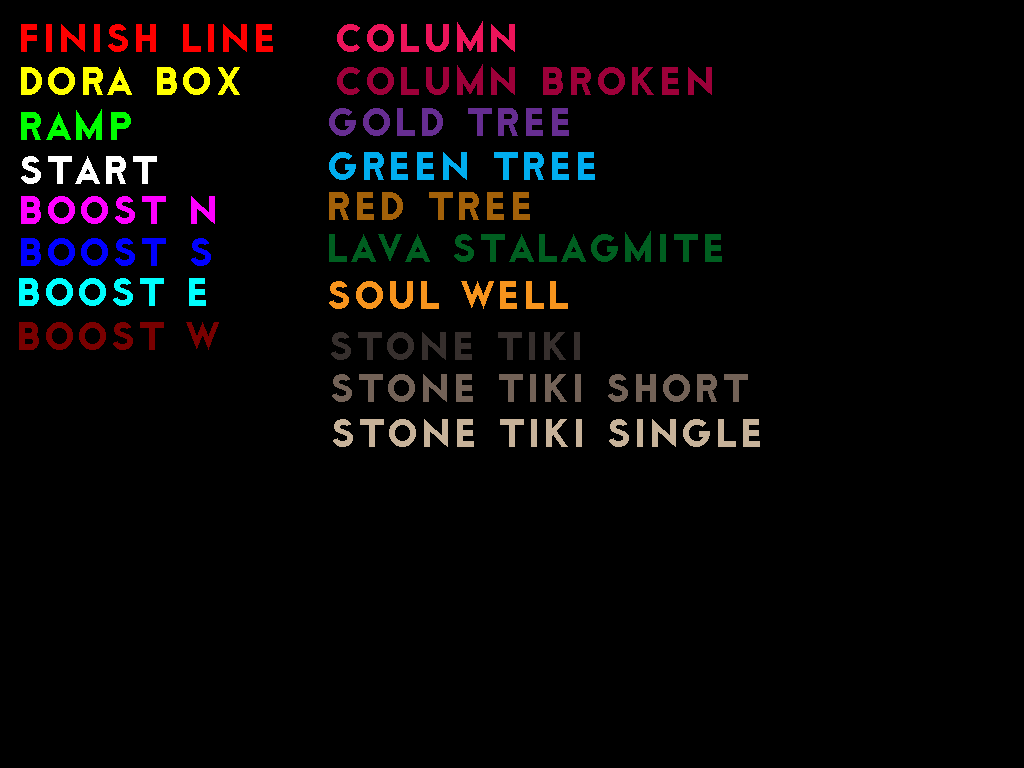
<style>
.page{position:relative;width:1024px;height:768px;background:#000000}
.page>*{position:absolute;margin:0}
.t1{font:48px "Cityof";color:#ff0000}
.t2{font:48px "Cityof";color:#ed145a}
.t3{font:48px "Cityof";color:#9d0039}
.t4{font:48px "Cityof";color:#ffff00}
.t5{font:48px "Cityof";color:#00ff00}
.t6{font:48px "Cityof";color:#662d91}
.t7{font:48px "Cityof";color:#ffffff}
.t8{font:48px "Cityof";color:#00adef}
.t9{font:48px "Cityof";color:#ff00ff}
.t10{font:48px "Cityof";color:#a36109}
.t11{font:48px "Cityof";color:#005e20}
.t12{font:48px "Cityof";color:#0000ff}
.t13{font:48px "Cityof";color:#00ffff}
.t14{font:48px "Cityof";color:#f7941d}
.t15{font:48px "Cityof";color:#790000}
.t16{font:48px "Cityof";color:#362f2d}
.t17{font:48px "Cityof";color:#736257}
.t18{font:48px "Cityof";color:#c7b299}
</style>
<div class="page">
<p class="t1" style="left:21px;top:24px;width:252px;height:28px">finish line</p>
<p class="t2" style="left:337px;top:21px;width:178px;height:31px">column</p>
<p class="t3" style="left:337px;top:64px;width:375px;height:31px">column broken</p>
<p class="t4" style="left:21px;top:67px;width:219px;height:28px">dora box</p>
<p class="t5" style="left:21px;top:109px;width:110px;height:31px">ramp</p>
<p class="t6" style="left:329px;top:108px;width:240px;height:28px">gold tree</p>
<p class="t7" style="left:21px;top:156px;width:136px;height:28px">start</p>
<p class="t8" style="left:329px;top:152px;width:266px;height:28px">green tree</p>
<p class="t9" style="left:21px;top:196px;width:194px;height:28px">boost n</p>
<p class="t10" style="left:329px;top:192px;width:201px;height:28px">red tree</p>
<p class="t11" style="left:329px;top:231px;width:393px;height:31px">lava stalagmite</p>
<p class="t12" style="left:21px;top:238px;width:190px;height:28px">boost s</p>
<p class="t13" style="left:19px;top:278px;width:187px;height:28px">boost e</p>
<p class="t14" style="left:329px;top:281px;width:239px;height:28px">soul well</p>
<p class="t15" style="left:19px;top:322px;width:200px;height:28px">boost w</p>
<p class="t16" style="left:331px;top:332px;width:249px;height:28px">stone tiki</p>
<p class="t17" style="left:332px;top:374px;width:416px;height:28px">stone tiki short</p>
<p class="t18" style="left:333px;top:419px;width:427px;height:28px">stone tiki single</p>
</div>
